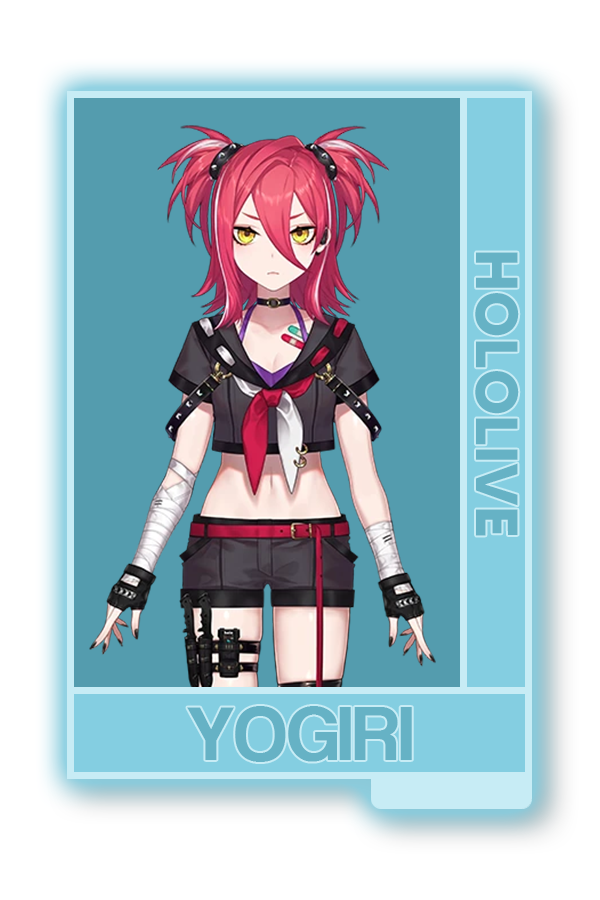
<style>
.page{position:relative;width:600px;height:900px;background:#549cae}
.page>*{position:absolute;margin:0}
.t1{font:59.2px "MADETOMMY-Bold";color:#66b2c5}
.t2{font:78.6px "CoolveticaRg-Regular";color:#66b2c5}
</style>
<div class="page">
<p class="t1" style="left:475px;top:252px;width:44px;height:284px;rotate:90deg">HOLOLIVE</p>
<p class="t2" style="left:187px;top:706px;width:225px;height:56px">YOGIRI</p>
</div>
